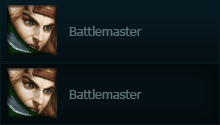
<style>
.page{position:relative;width:220px;height:125px}
.page>*{position:absolute;margin:0}
.t1{font:13px "Tahoma";color:#587173}
</style>
<div class="page">
<p class="t1" style="left:69px;top:26px;width:73px;height:10px">Battlemaster</p>
<p class="t1" style="left:69px;top:89px;width:73px;height:10px">Battlemaster</p>
</div>
